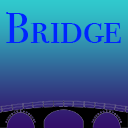
<style>
.page{position:relative;width:128px;height:128px}
.page>*{position:absolute;margin:0}
.t1{font:44px "BodoniSvtyTwoSCITCTT-Book";color:#0024ff}
</style>
<div class="page">
<p class="t1" style="left:6px;top:12px;width:115px;height:31px">Bridge</p>
</div>
